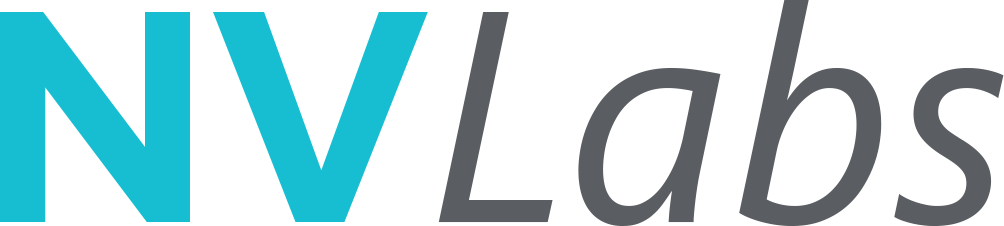
<style>
.page{position:relative;width:1004px;height:226px;background:#ffffff}
.page>*{position:absolute;margin:0}
.t1{font:300px "SegoeUI-Italic";color:#5a5d61}
.t2{font:300px "Montserrat-SemiBold";color:#17bed2}
</style>
<div class="page">
<p class="t1" style="left:0px;top:0px;width:1004px;height:226px"><span class="t2">NV</span>Labs</p>
</div>
